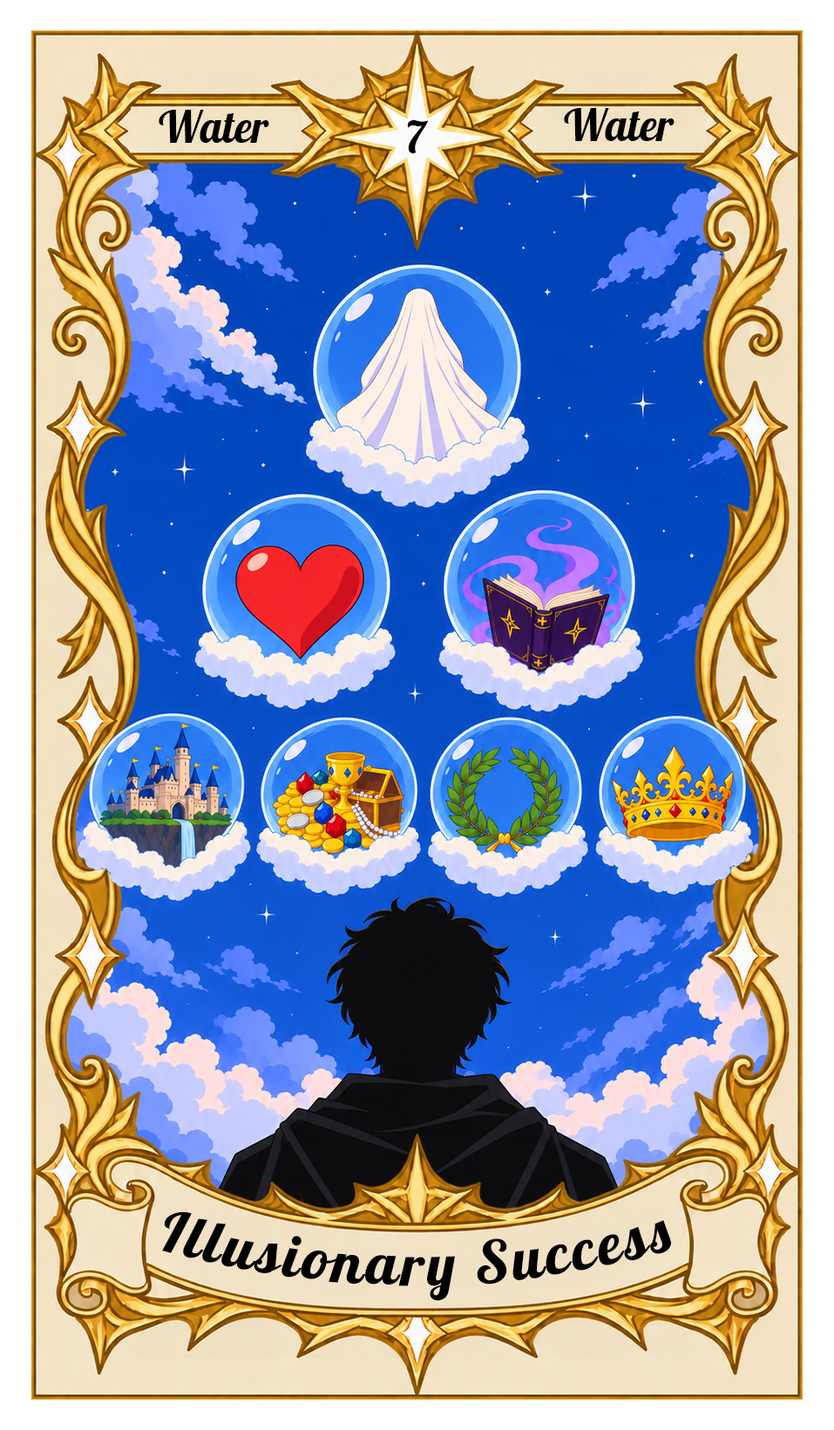
<style>
.page{position:relative;width:834px;height:1430px}
.page>*{position:absolute;margin:0}
.t1{font:43.6px "Lobster-Regular";color:#000000}
.t2{font:58.1px "Lobster-Regular";letter-spacing:0.05em;color:#000000}
</style>
<div class="page">
<p class="t1" style="left:159px;top:110px;width:110px;height:33px">Water</p>
<p class="t1" style="left:564px;top:108px;width:110px;height:33px">Water</p>
<p class="t1" style="left:407px;top:120px;width:21px;height:33px">7</p>
<p class="t2" style="left:162px;top:1212px;width:509px;height:89px">Illusionary Success</p>
</div>
